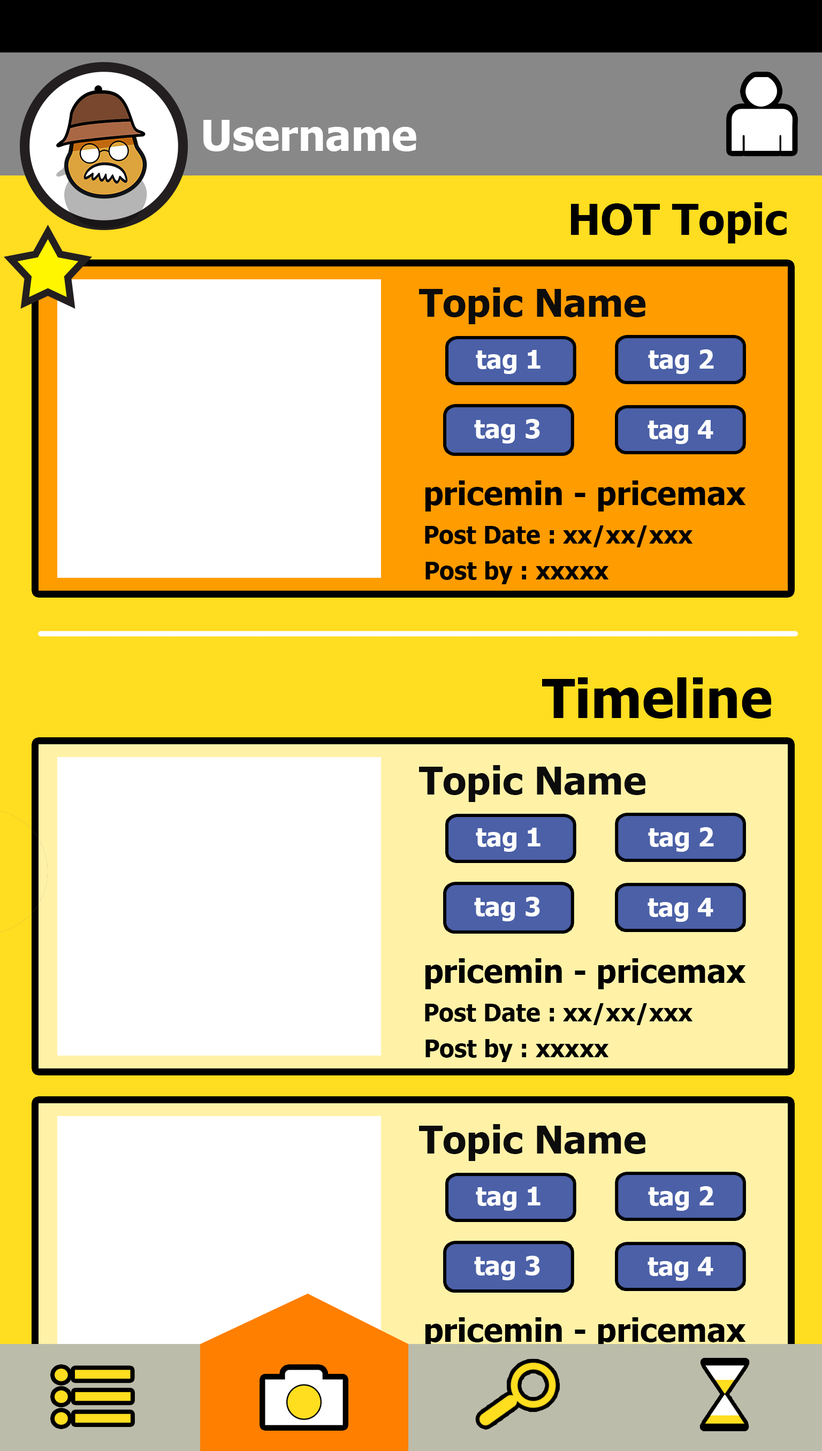
<style>
.page{position:relative;width:822px;height:1451px;background:#ffffff}
.page>*{position:absolute;margin:0}
.t1{font:42.8px "Tahoma-Bold";color:#ffffff}
.t2{font:42.8px "Tahoma-Bold";color:#000000}
.t3{font:38.5px "Tahoma-Bold";color:#0c0c0c}
.t4{font:25.7px "Tahoma-Bold";color:#fefefe}
.t5{font:32.1px "Tahoma-Bold";color:#000000}
.t6{font:24.1px "Tahoma-Bold";color:#000000}
.t7{font:53.5px "Tahoma-Bold";color:#000000}
</style>
<div class="page">
<p class="t1" style="left:203px;top:120px;width:213px;height:31px">Username</p>
<p class="t2" style="left:571px;top:202px;width:215px;height:41px">HOT Topic</p>
<p class="t3" style="left:419px;top:287px;width:227px;height:37px">Topic Name</p>
<p class="t4" style="left:476px;top:350px;width:64px;height:24px">tag 1</p>
<p class="t4" style="left:648px;top:349px;width:66px;height:25px">tag 2</p>
<p class="t4" style="left:474px;top:419px;width:66px;height:25px">tag 3</p>
<p class="t4" style="left:647px;top:420px;width:66px;height:24px">tag 4</p>
<p class="t5" style="left:425px;top:480px;width:321px;height:31px">pricemin - pricemax</p>
<p class="t6" style="left:425px;top:525px;width:268px;height:22px">Post Date : xx/xx/xxx</p>
<p class="t6" style="left:425px;top:561px;width:184px;height:23px">Post by : xxxxx</p>
<p class="t7" style="left:542px;top:677px;width:230px;height:42px">Timeline</p>
<p class="t3" style="left:419px;top:765px;width:227px;height:37px">Topic Name</p>
<p class="t4" style="left:476px;top:828px;width:64px;height:24px">tag 1</p>
<p class="t4" style="left:648px;top:827px;width:66px;height:25px">tag 2</p>
<p class="t4" style="left:474px;top:897px;width:66px;height:24px">tag 3</p>
<p class="t4" style="left:647px;top:898px;width:66px;height:24px">tag 4</p>
<p class="t5" style="left:425px;top:958px;width:321px;height:31px">pricemin - pricemax</p>
<p class="t6" style="left:425px;top:1003px;width:268px;height:22px">Post Date : xx/xx/xxx</p>
<p class="t6" style="left:425px;top:1039px;width:184px;height:23px">Post by : xxxxx</p>
<p class="t3" style="left:419px;top:1124px;width:227px;height:37px">Topic Name</p>
<p class="t4" style="left:476px;top:1187px;width:64px;height:24px">tag 1</p>
<p class="t4" style="left:648px;top:1186px;width:66px;height:25px">tag 2</p>
<p class="t4" style="left:474px;top:1256px;width:66px;height:24px">tag 3</p>
<p class="t4" style="left:647px;top:1257px;width:66px;height:24px">tag 4</p>
<p class="t5" style="left:425px;top:1317px;width:321px;height:31px">pricemin - pricemax</p>
</div>
